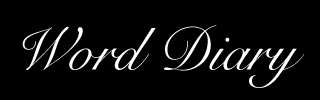
<style>
.page{position:relative;width:320px;height:100px;background:#000000}
.page>*{position:absolute;margin:0}
.t1{font:60px "SnellRoundhand";color:#ffffff}
</style>
<div class="page">
<p class="t1" style="left:22px;top:25px;width:283px;height:63px">Word Diary</p>
</div>
